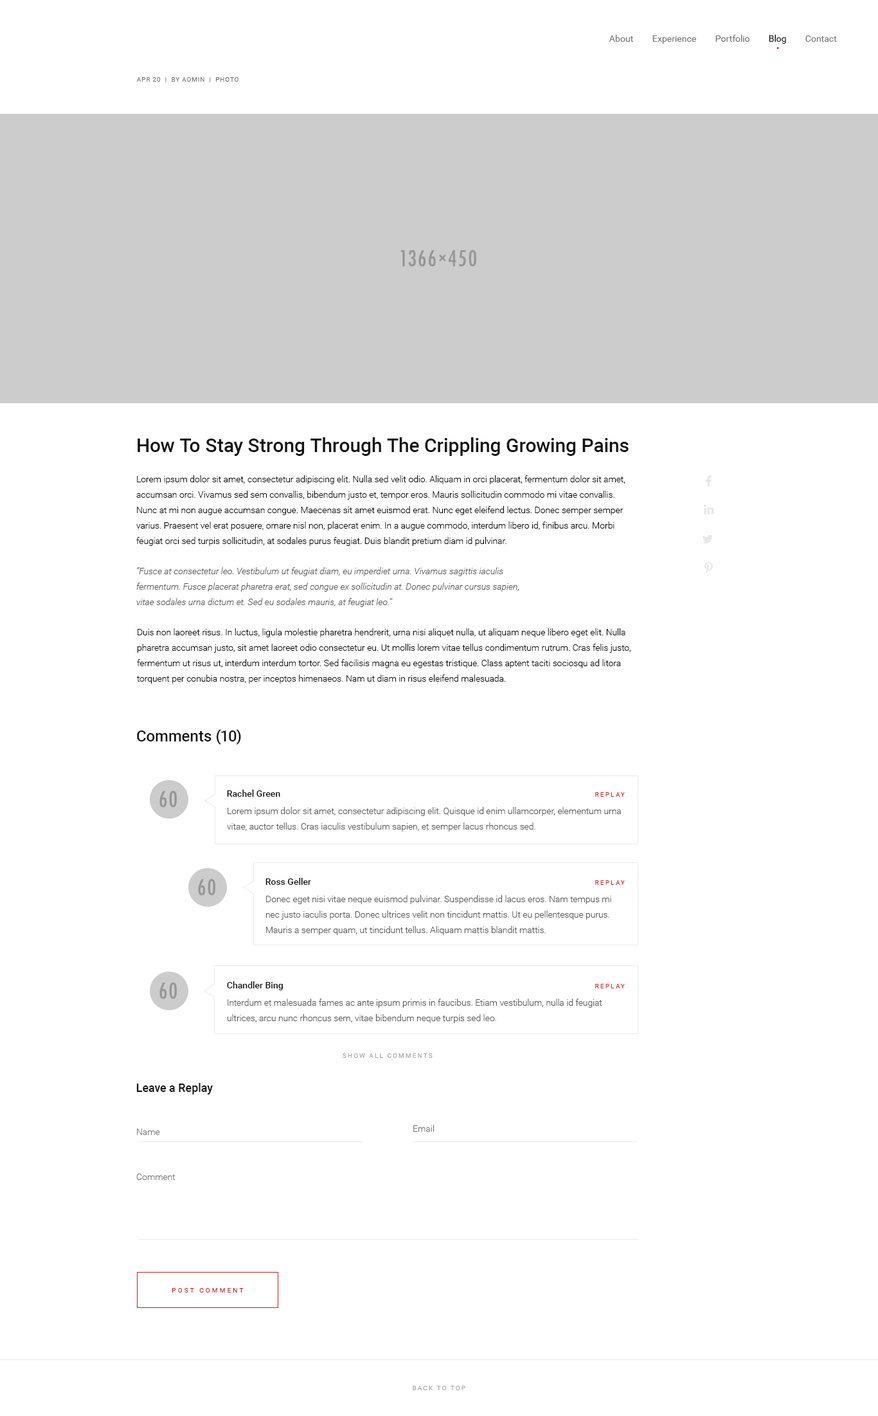
<style>
.page{position:relative;width:878px;height:1416px;background:#ffffff}
.page>*{position:absolute;margin:0}
.t1{font:9px "Roboto-Regular";color:#797979}
.t2{font:9px "Roboto-Regular";color:#111111}
.t3{font:6.4px "Roboto-Regular";letter-spacing:0.075em;color:#797979;text-transform:uppercase}
.t4{font:19.3px "Roboto-Medium";color:#111111}
.t5{font:9px/15.4px "Roboto-Light";color:#000000}
.t6{font:9px/15.4px "Roboto-LightItalic";color:#585858}
.t7{font:15.4px "Roboto-Medium";color:#111111}
.t8{font:9px "Roboto-Medium";color:#111111}
.t9{font:6.4px "Roboto-Regular";letter-spacing:0.2em;color:#c51d1d;text-transform:uppercase}
.t10{font:9px/15.4px "Roboto-Light";color:#585858}
.t11{font:6.4px "Roboto-Regular";letter-spacing:0.2em;color:#a6a6a6;text-transform:uppercase}
.t12{font:11.6px "Roboto-Medium";color:#111111}
.t13{font:9px "Roboto-Light";color:#737373}
.t14{font:6.4px "Roboto-Regular";letter-spacing:0.3em;color:#c51d1d;text-transform:uppercase}
</style>
<div class="page">
<p class="t1" style="left:609px;top:35px;width:24px;height:7px">About</p>
<p class="t1" style="left:652px;top:35px;width:44px;height:9px">Experience</p>
<p class="t1" style="left:716px;top:35px;width:34px;height:7px">Portfolio</p>
<p class="t2" style="left:769px;top:35px;width:17px;height:9px">Blog</p>
<p class="t1" style="left:806px;top:35px;width:31px;height:7px">Contact</p>
<p class="t3" style="left:136px;top:77px;width:103px;height:5px">apr 20  |  by admin  |  Photo</p>
<p class="t4" style="left:138px;top:437px;width:491px;height:19px">How To Stay Strong Through The Crippling Growing Pains</p>
<p class="t5" style="left:136px;top:475px;width:490px;height:71px">Lorem ipsum dolor sit amet, consectetur adipiscing elit. Nulla sed velit odio. Aliquam in orci placerat, fermentum dolor sit amet, accumsan orci. Vivamus sed sem convallis, bibendum justo et, tempor eros. Mauris sollicitudin commodo mi vitae convallis. Nunc at mi non augue accumsan congue. Maecenas sit amet euismod erat. Nunc eget eleifend lectus. Donec semper semper varius. Praesent vel erat posuere, ornare nisl non, placerat enim. In a augue commodo, interdum libero id, finibus arcu. Morbi feugiat orci sed turpis sollicitudin, at sodales purus feugiat. Duis blandit pretium diam id pulvinar.</p>
<p class="t6" style="left:136px;top:567px;width:383px;height:40px">“Fusce at consectetur leo. Vestibulum ut feugiat diam, eu imperdiet urna. Vivamus sagittis iaculis fermentum. Fusce placerat pharetra erat, sed congue ex sollicitudin at. Donec pulvinar cursus sapien, vitae sodales urna dictum et. Sed eu sodales mauris, at feugiat leo.”</p>
<p class="t5" style="left:137px;top:628px;width:494px;height:55px">Duis non laoreet risus. In luctus, ligula molestie pharetra hendrerit, urna nisi aliquet nulla, ut aliquam neque libero eget elit. Nulla pharetra accumsan justo, sit amet laoreet odio consectetur eu. Ut mollis lorem vitae tellus condimentum rutrum. Cras felis justo, fermentum ut risus ut, interdum interdum tortor. Sed facilisis magna eu egestas tristique. Class aptent taciti sociosqu ad litora torquent per conubia nostra, per inceptos himenaeos. Nam ut diam in risus eleifend malesuada.</p>
<p class="t7" style="left:137px;top:729px;width:104px;height:15px">Comments (10)</p>
<p class="t8" style="left:227px;top:789px;width:53px;height:8px">Rachel Green</p>
<p class="t9" style="left:595px;top:792px;width:30px;height:5px">replay</p>
<p class="t10" style="left:227px;top:807px;width:394px;height:24px">Lorem ipsum dolor sit amet, consectetur adipiscing elit. Quisque id enim ullamcorper, elementum urna vitae, auctor tellus. Cras iaculis vestibulum sapien, et semper lacus rhoncus sed.</p>
<p class="t8" style="left:266px;top:878px;width:45px;height:7px">Ross Geller</p>
<p class="t9" style="left:595px;top:880px;width:30px;height:5px">replay</p>
<p class="t10" style="left:266px;top:895px;width:345px;height:40px">Donec eget nisi vitae neque euismod pulvinar. Suspendisse id lacus eros. Nam tempus mi nec justo iaculis porta. Donec ultrices velit non tincidunt mattis. Ut eu pellentesque purus. Mauris a semper quam, ut tincidunt tellus. Aliquam mattis blandit mattis.</p>
<p class="t8" style="left:227px;top:981px;width:56px;height:9px">Chandler Bing</p>
<p class="t9" style="left:595px;top:984px;width:30px;height:4px">replay</p>
<p class="t10" style="left:227px;top:998px;width:375px;height:25px">Interdum et malesuada fames ac ante ipsum primis in faucibus. Etiam vestibulum, nulla id feugiat ultrices, arcu nunc rhoncus sem, vitae bibendum neque turpis sed leo.</p>
<p class="t11" style="left:343px;top:1053px;width:90px;height:5px">show all comments</p>
<p class="t12" style="left:136px;top:1083px;width:77px;height:11px">Leave a Replay</p>
<p class="t13" style="left:137px;top:1128px;width:23px;height:7px">Name</p>
<p class="t13" style="left:413px;top:1124px;width:22px;height:7px">Email</p>
<p class="t13" style="left:136px;top:1173px;width:40px;height:7px">Comment</p>
<p class="t14" style="left:172px;top:1288px;width:72px;height:4px">post comment</p>
<p class="t11" style="left:413px;top:1385px;width:52px;height:5px">back to top</p>
</div>
